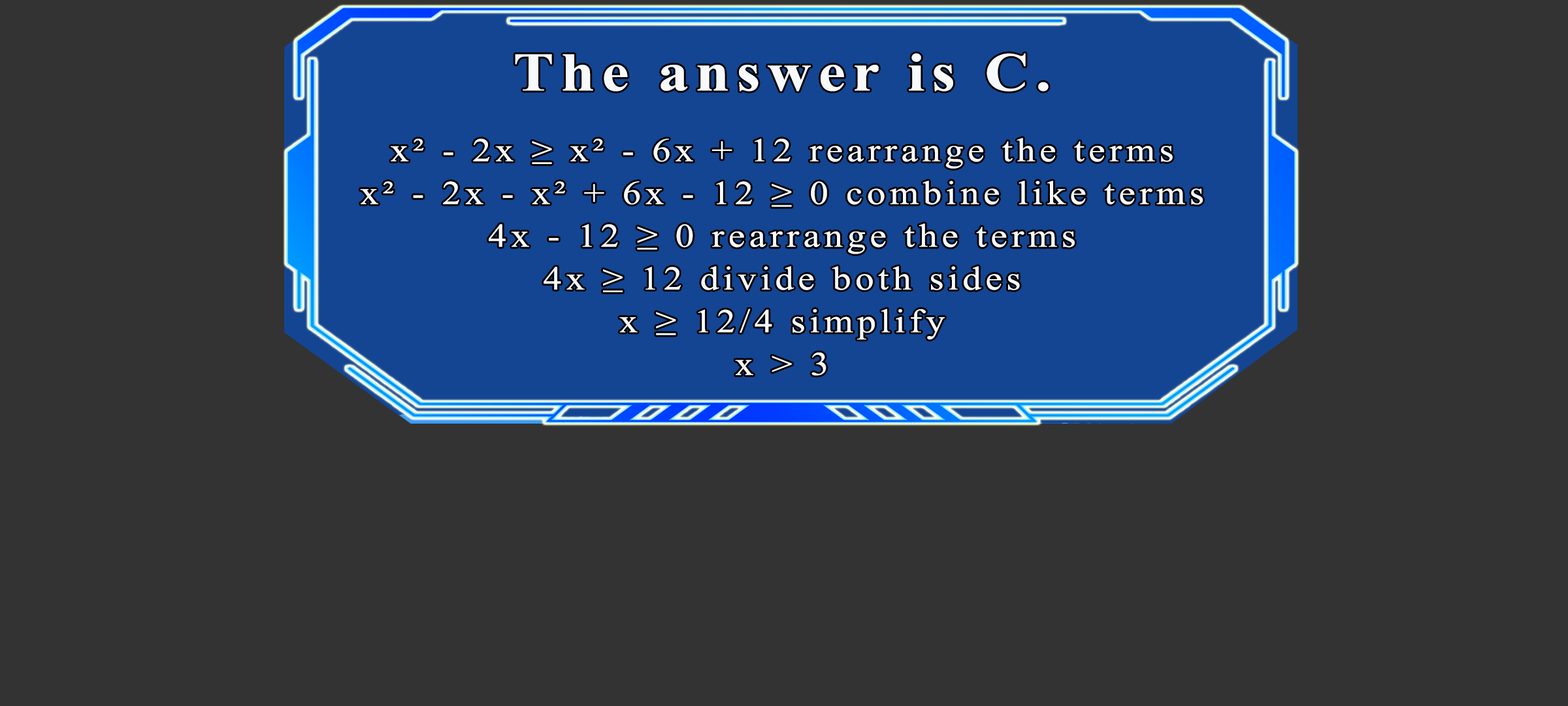
<style>
.page{position:relative;width:1568px;height:706px;background:#333333}
.page>*{position:absolute;margin:0}
.t1{font:54.4px "TimesNewRomanPS-BoldMT";letter-spacing:0.115em;color:#f7f9fb;scale:1.12 1}
.t2{font:33.2px/21.4px "TimesNewRomanPSMT";letter-spacing:0.115em;color:#f7f9fb;scale:1.12 1}
</style>
<div class="page">
<p class="t1" style="left:515px;top:53px;width:534px;height:38px">The answer is C.</p>
<p class="t2" style="left:360px;top:138px;width:843px;height:238px;text-align:center">x² - 2x ≥ x² - 6x + 12 rearrange the terms<br><br>x² - 2x - x² + 6x - 12 ≥ 0 combine like terms<br><br>4x - 12 ≥ 0 rearrange the terms<br><br>4x ≥ 12 divide both sides<br><br>x ≥ 12/4 simplify<br><br>x &gt; 3</p>
</div>
